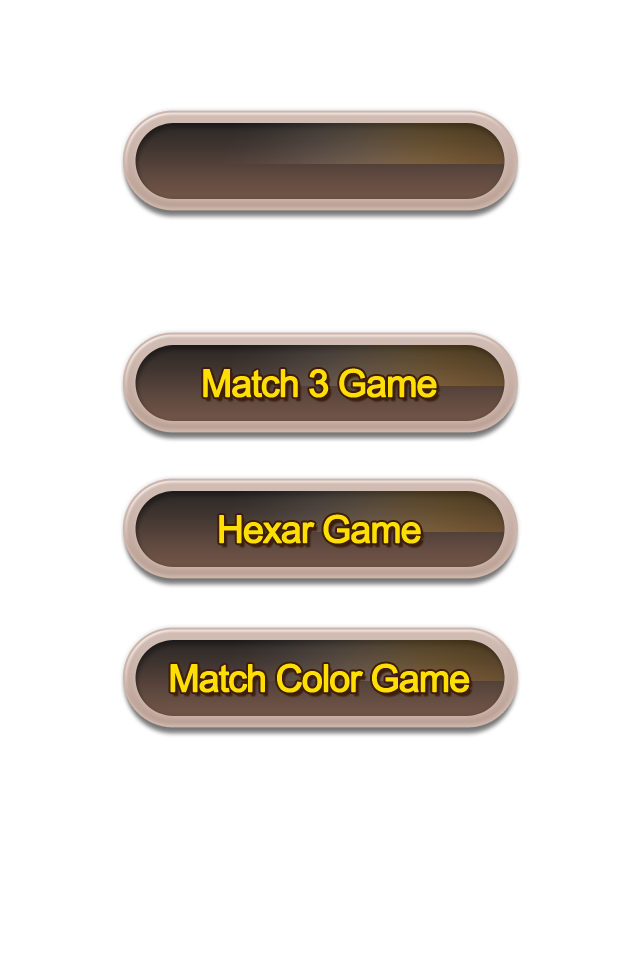
<style>
.page{position:relative;width:640px;height:960px;background:#ffffff}
.page>*{position:absolute;margin:0}
.t1{font:37.5px "ArialMT";letter-spacing:-0.05em;color:#ffde00;font-weight:bold}
</style>
<div class="page">
<p class="t1" style="left:203px;top:368px;width:234px;height:30px">Match 3 Game</p>
<p class="t1" style="left:219px;top:514px;width:202px;height:30px">Hexar Game</p>
<p class="t1" style="left:170px;top:663px;width:300px;height:30px">Match Color Game</p>
</div>
